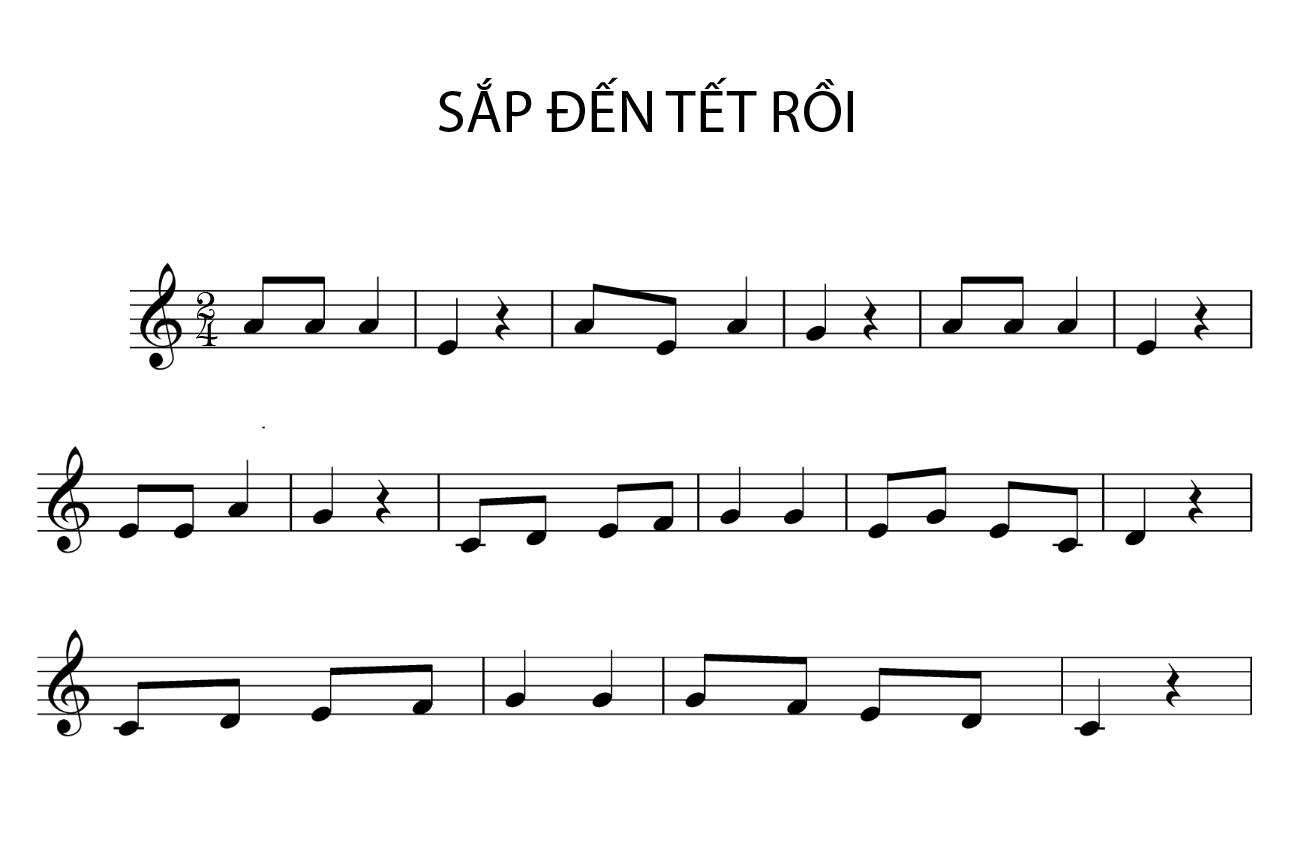
<style>
.page{position:relative;width:1292px;height:860px;background:#ffffff}
.page>*{position:absolute;margin:0}
.t1{font:60px "MyriadPro-Regular";color:#000000}
.t2{font:37px "UVNBachTuyet";color:#000000}
</style>
<div class="page">
<p class="t1" style="left:439px;top:77px;width:414px;height:55px">SẮP ĐẾN TẾT RỒI</p>
<p class="t2" style="left:197px;top:292px;width:18px;height:27px">2</p>
<p class="t2" style="left:195px;top:317px;width:23px;height:29px">4</p>
</div>
